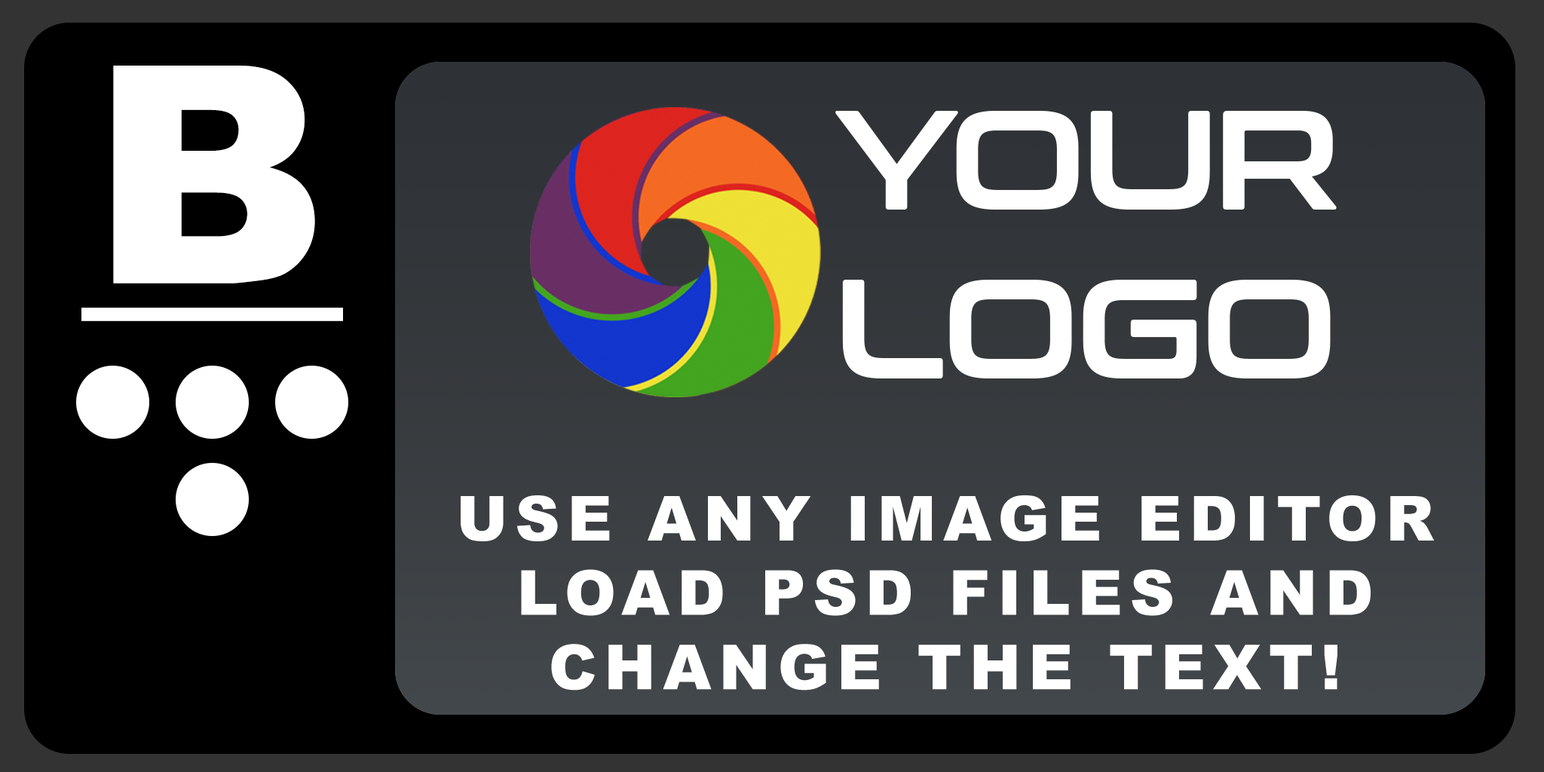
<style>
.page{position:relative;width:1544px;height:772px;background:#000000}
.page>*{position:absolute;margin:0}
.t1{font:303.9px "Arial-Black";letter-spacing:0.12em;color:#ffffff}
.t2{font:140.8px "ConthraxSb-Regular";letter-spacing:-0.035em;color:#ffffff}
.t3{font:62px "Arial-Black";letter-spacing:0.12em;color:#ffffff}
</style>
<div class="page">
<p class="t1" style="left:113px;top:66px;width:202px;height:218px">B</p>
<p class="t2" style="left:835px;top:111px;width:502px;height:268px">YOUR<br>LOGO</p>
<p class="t3" style="left:461px;top:495px;width:974px;height:196px;text-align:center">USE ANY IMAGE EDITOR<br>LOAD PSD FILES AND<br>CHANGE THE TEXT!</p>
</div>
